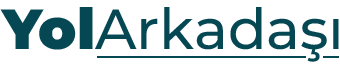
<style>
.page{position:relative;width:340px;height:66px;background:#ffffff}
.page>*{position:absolute;margin:0}
.t1{font:56.6px "Montserrat-Medium";color:#054752}
.t2{font:56.6px "Montserrat-Black";color:#054752}
</style>
<div class="page">
<p class="t1" style="left:0px;top:7px;width:339px;height:55px"><span class="t2">Yol</span>Arkadaşı</p>
</div>
